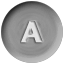
<style>
.page{position:relative;width:64px;height:64px;background:#ffffff}
.page>*{position:absolute;margin:0}
.t1{font:30px "StoneSansITC-Bold";color:#e1e1e1}
</style>
<div class="page">
<p class="t1" style="left:21px;top:21px;width:22px;height:22px">A</p>
</div>
